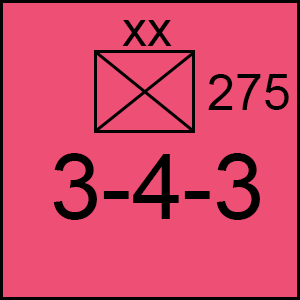
<style>
.page{position:relative;width:300px;height:300px;background:#ee4f74}
.page>*{position:absolute;margin:0}
.t1{font:50px "ArialMT";color:#000000}
.t2{font:91.7px "ArialMT";color:#000000}
</style>
<div class="page">
<p class="t1" style="left:122px;top:20px;width:50px;height:26px">xx</p>
<p class="t1" style="left:208px;top:74px;width:81px;height:36px">275</p>
<p class="t2" style="left:53px;top:153px;width:207px;height:67px">3-4-3</p>
</div>
